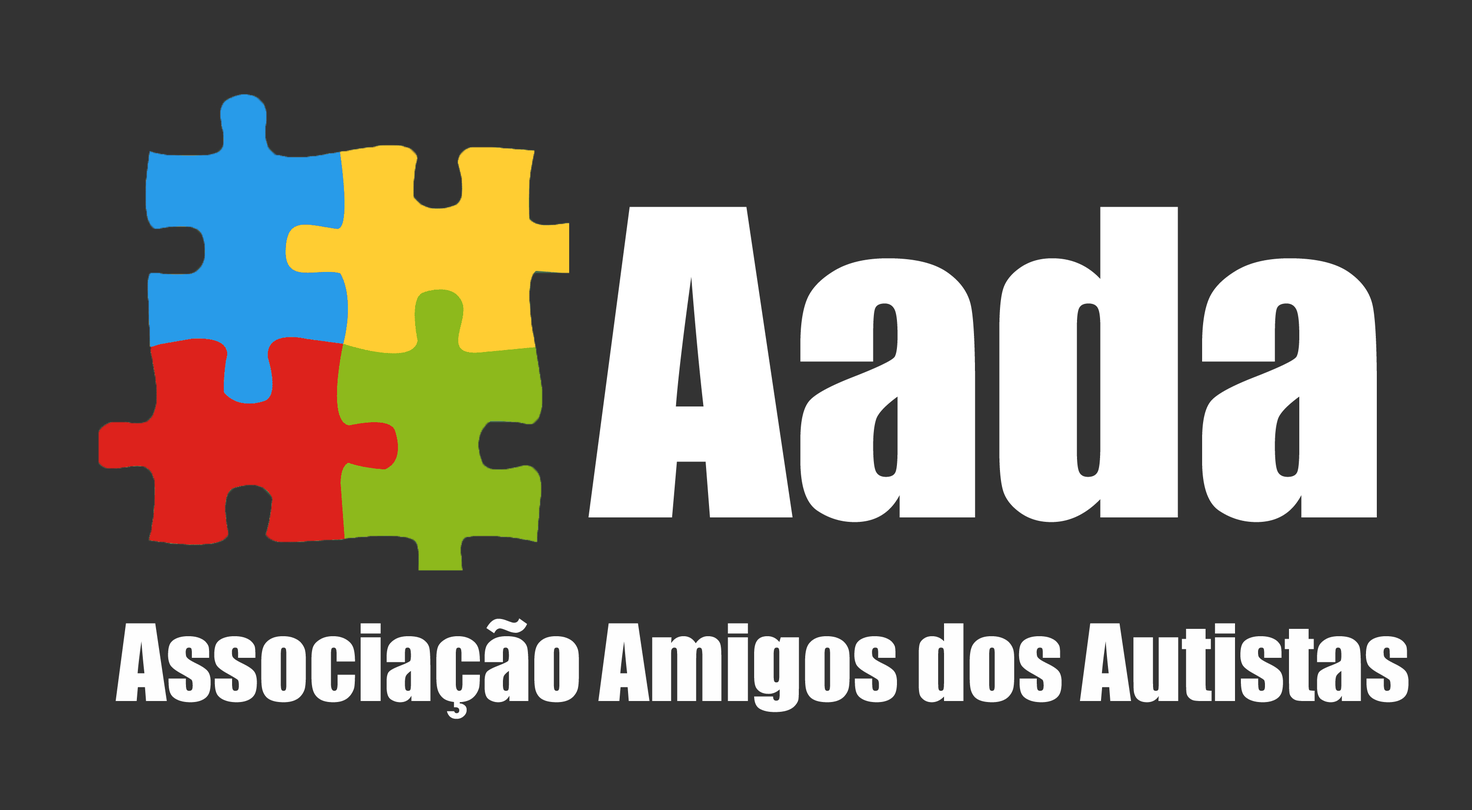
<style>
.page{position:relative;width:1472px;height:810px;background:#333333}
.page>*{position:absolute;margin:0}
.t1{font:392.6px "Impact";color:#ffffff}
.t2{font:98.2px "Impact";color:#fefefe}
</style>
<div class="page">
<p class="t1" style="left:588px;top:207px;width:789px;height:315px">Aada</p>
<p class="t2" style="left:115px;top:618px;width:1294px;height:101px">Associação Amigos dos Autistas</p>
</div>
